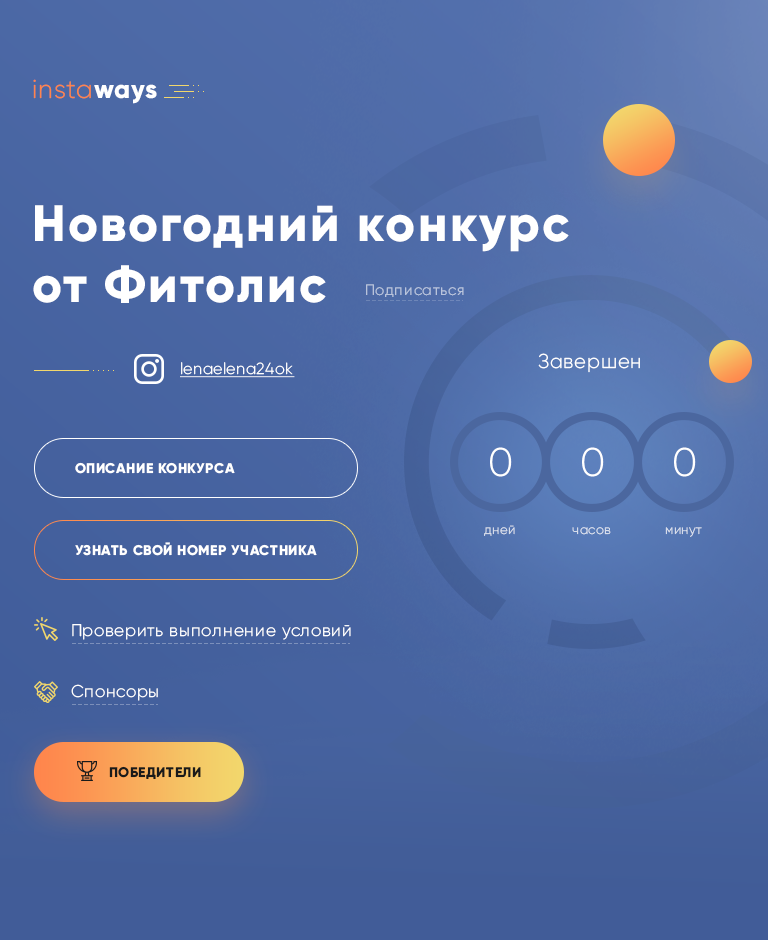
<style>
.page{position:relative;width:768px;height:940px}
.page>*{position:absolute;margin:0}
.t1{font:26px "Gilroy-Light";letter-spacing:0.04em;color:#ff854c}
.t2{font:26px "Gilroy-ExtraBold";letter-spacing:0.04em;color:#ffffff}
.t3{font:51px "Gilroy-ExtraBold";letter-spacing:0.04em;color:#ffffff}
.t4{font:15px "Gilroy-Light";letter-spacing:0.04em;color:#b8c4dc}
.t5{font:20px "Gilroy-Light";letter-spacing:0.04em;color:#ffffff}
.t6{font:16px "Gilroy-Light";letter-spacing:0.04em;color:#ffffff;text-decoration:underline}
.t7{font:40px "Gilroy-Light";letter-spacing:0.04em;color:#ffffff}
.t8{font:40px "Gilroy-Light";letter-spacing:0.04em}
.t9{font:14px "Gilroy-ExtraBold";letter-spacing:0.04em;color:#ffffff;text-transform:uppercase}
.t10{font:13px "Gilroy-Light";letter-spacing:0.04em;color:#d5dbe9}
.t11{font:13px "Gilroy-Light";letter-spacing:0.04em;color:#d6ddeb}
.t12{font:13px "Gilroy-Light";letter-spacing:0.04em;color:#d6dcea}
.t13{font:17px "Gilroy-Light";letter-spacing:0.04em;color:#ffffff}
.t14{font:14px "Gilroy-ExtraBold";letter-spacing:0.04em;color:#191a1a;text-transform:uppercase}
</style>
<div class="page">
<p class="t1" style="left:33px;top:79px;width:124px;height:25px">insta<span class="t2">ways</span></p>
<p class="t1" style="left:33px;top:79px;width:124px;height:25px">insta<span class="t2">ways</span></p>
<p class="t3" style="left:33px;top:205px;width:536px;height:98px">Новогодний конкурс<br>от Фитолис</p>
<p class="t3" style="left:33px;top:205px;width:536px;height:98px">Новогодний конкурс<br>от Фитолис</p>
<p class="t4" style="left:366px;top:284px;width:98px;height:13px">Подписаться</p>
<p class="t4" style="left:366px;top:284px;width:98px;height:13px">Подписаться</p>
<p class="t5" style="left:538px;top:353px;width:102px;height:20px">Завершен</p>
<p class="t6" style="left:180px;top:362px;width:115px;height:16px">lenaelena24ok</p>
<p class="t6" style="left:180px;top:362px;width:115px;height:16px">lenaelena24ok</p>
<p class="t7" style="left:490px;top:447px;width:22px;height:30px">0</p>
<p class="t8" style="left:491px;top:447px;width:19px;height:30px">5</p>
<p class="t7" style="left:582px;top:447px;width:22px;height:30px">0</p>
<p class="t7" style="left:674px;top:447px;width:22px;height:30px">0</p>
<p class="t9" style="left:75px;top:462px;width:160px;height:12px">Описание конкурса</p>
<p class="t9" style="left:75px;top:462px;width:160px;height:12px">Описание конкурса</p>
<p class="t10" style="left:484px;top:525px;width:31px;height:11px">дней</p>
<p class="t10" style="left:484px;top:525px;width:31px;height:11px">дней</p>
<p class="t11" style="left:572px;top:527px;width:39px;height:8px">часов</p>
<p class="t11" style="left:572px;top:527px;width:39px;height:8px">часов</p>
<p class="t12" style="left:665px;top:527px;width:37px;height:10px">минут</p>
<p class="t12" style="left:665px;top:527px;width:37px;height:10px">минут</p>
<p class="t9" style="left:75px;top:542px;width:242px;height:14px">Узнать свой номер участника</p>
<p class="t9" style="left:75px;top:542px;width:242px;height:14px">Узнать свой номер участника</p>
<p class="t13" style="left:72px;top:624px;width:279px;height:16px">Проверить выполнение условий</p>
<p class="t13" style="left:72px;top:624px;width:279px;height:16px">Проверить выполнение условий</p>
<p class="t13" style="left:71px;top:684px;width:87px;height:17px">Спонсоры</p>
<p class="t13" style="left:71px;top:684px;width:87px;height:17px">Спонсоры</p>
<p class="t14" style="left:109px;top:766px;width:92px;height:13px">Победители</p>
</div>
